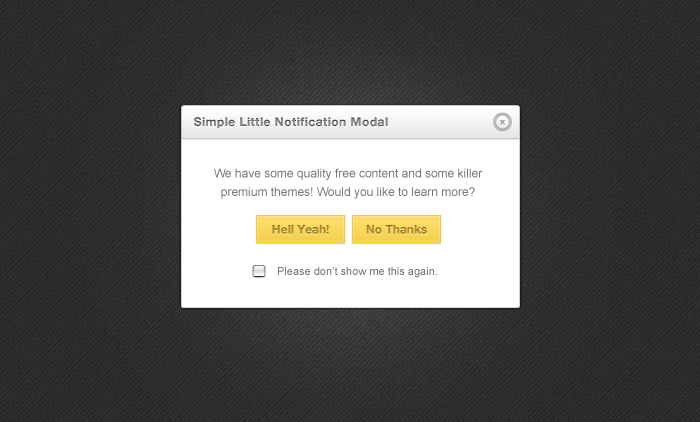
<style>
.page{position:relative;width:700px;height:422px}
.page>*{position:absolute;margin:0}
.t1{font:12px "HelveticaNeue-Bold";letter-spacing:0.04em;color:#888888}
.t2{font:8.2px "Arial-BoldMT";color:#a9a9a9;scale:1.33 1}
.t3{font:12px/18.4px "ArialMT";color:#777777}
.t4{font:12px "HelveticaNeue-Bold";color:#b1911f}
.t5{font:11px "ArialMT";color:#777777}
</style>
<div class="page">
<p class="t1" style="left:194px;top:117px;width:194px;height:12px">Simple Little Notification Modal</p>
<p class="t2" style="left:499px;top:120px;width:7px;height:5px">x</p>
<p class="t3" style="left:214px;top:168px;width:269px;height:31px;text-align:center">We have some quality free content and some killer premium themes! Would you like to learn more?</p>
<p class="t4" style="left:272px;top:225px;width:57px;height:9px">Hell Yeah!</p>
<p class="t4" style="left:366px;top:225px;width:61px;height:9px">No Thanks</p>
<p class="t5" style="left:278px;top:267px;width:159px;height:11px">Please don’t show me this again.</p>
</div>
